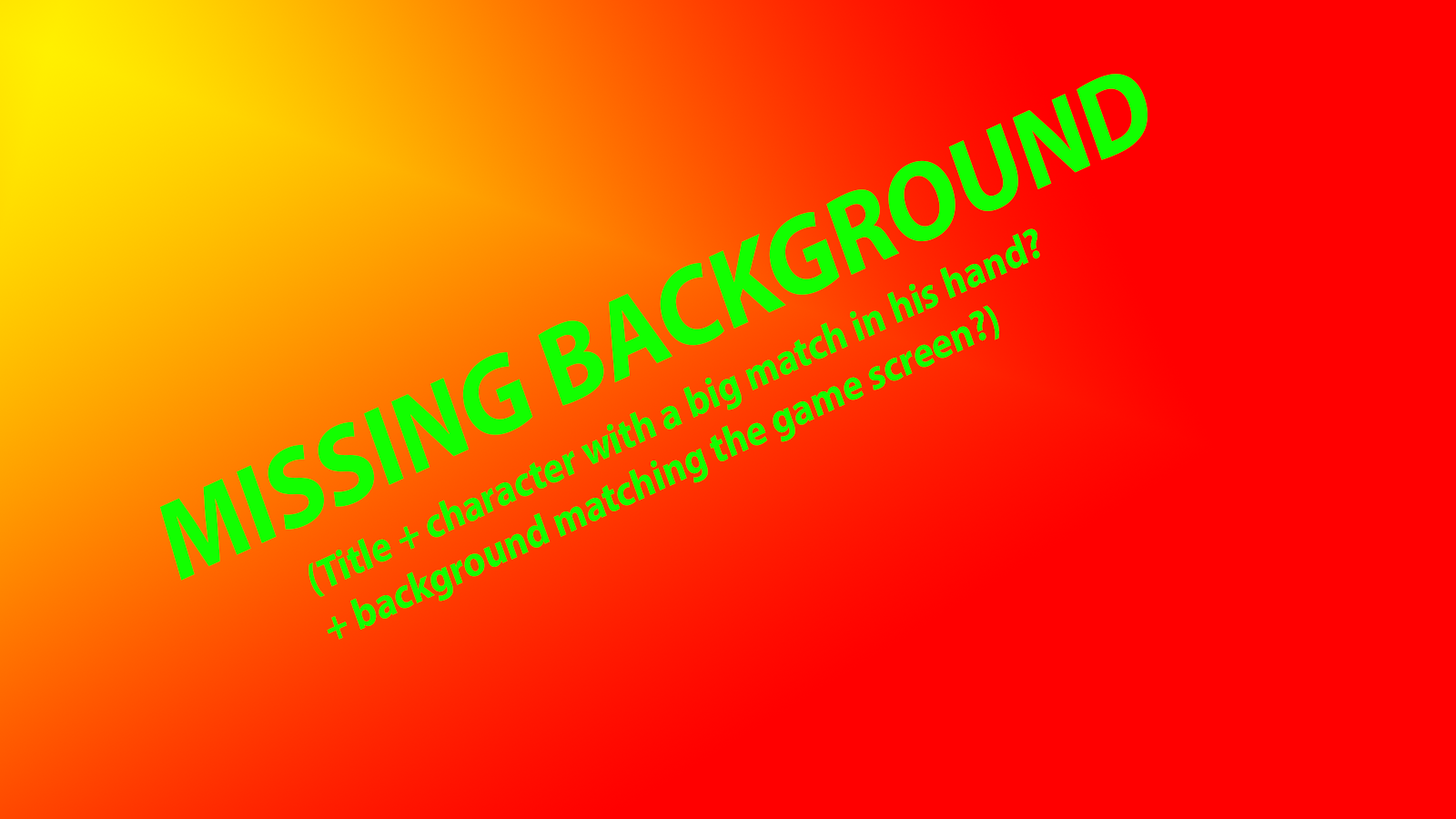
<style>
.page{position:relative;width:1456px;height:819px;background:#ff0000}
.page>*{position:absolute;margin:0}
.t1{font:112.4px "MyriadPro-Bold";color:#12ff00;scale:0.91 1}
.t2{font:43px "MyriadPro-Bold";color:#12ff00;scale:0.91 1}
</style>
<div class="page">
<p class="t1" style="left:159px;top:74px;width:988px;height:507px;rotate:-25deg">MISSING BACKGROUND</p>
<p class="t2" style="left:308px;top:228px;width:732px;height:412px;rotate:-25deg">(Title + character with a big match in his hand? + background matching the game screen?)</p>
</div>
